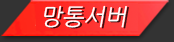
<style>
.page{position:relative;width:174px;height:42px}
.page>*{position:absolute;margin:0}
.t1{font:23px "NanumGothic";color:#ffffff;font-style:italic}
</style>
<div class="page">
<p class="t1" style="left:44px;top:5px;width:83px;height:23px">망통서버</p>
</div>
